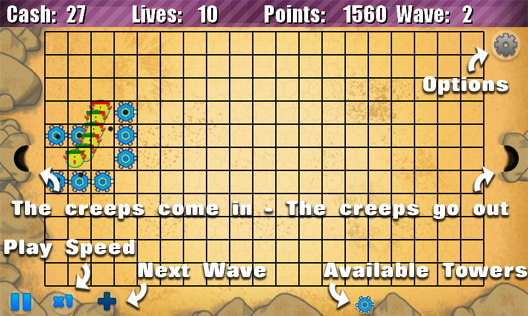
<style>
.page{position:relative;width:528px;height:316px}
.page>*{position:absolute;margin:0}
.t1{font:18.3px "RollingNoOne-ExtraBold";letter-spacing:0.025em;color:#ffffff}
</style>
<div class="page">
<p class="t1" style="left:423px;top:76px;width:85px;height:19px">Options</p>
<p class="t1" style="left:11px;top:200px;width:241px;height:19px">The creeps come in</p>
<p class="t1" style="left:265px;top:200px;width:244px;height:19px">- The creeps go out</p>
<p class="t1" style="left:4px;top:239px;width:131px;height:19px">Play Speed</p>
<p class="t1" style="left:138px;top:262px;width:128px;height:16px">Next Wave</p>
<p class="t1" style="left:323px;top:262px;width:204px;height:16px">Available Towers</p>
</div>
